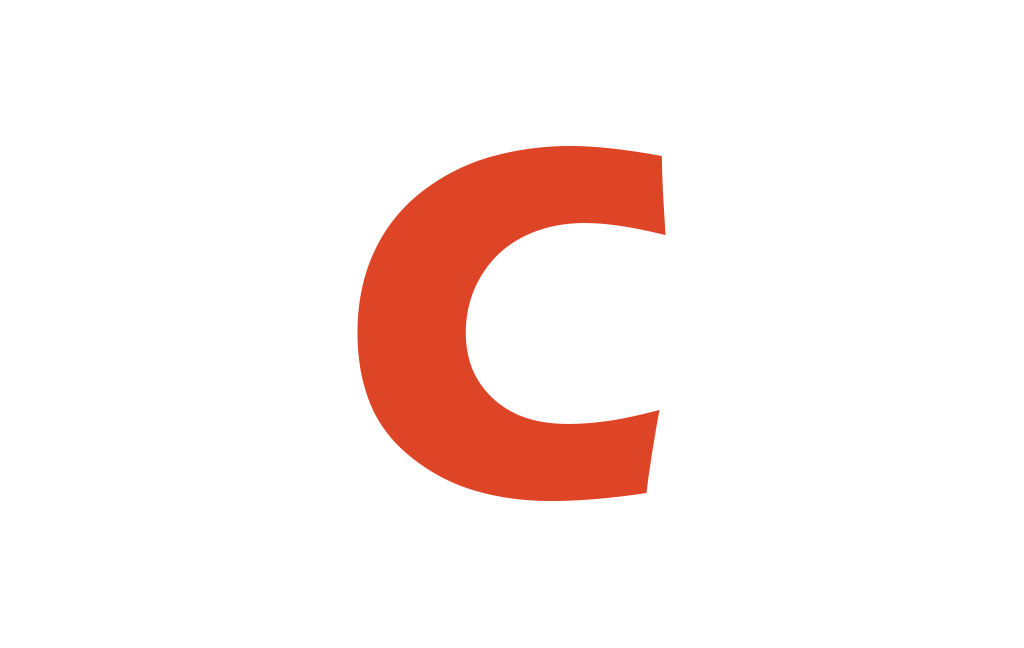
<style>
.page{position:relative;width:1024px;height:648px;background:#ffffff}
.page>*{position:absolute;margin:0}
.t1{font:512px "ErasITC-Bold";letter-spacing:0.04em;color:#dd4526;text-transform:uppercase}
</style>
<div class="page">
<p class="t1" style="left:357px;top:146px;width:309px;height:355px">C</p>
</div>
